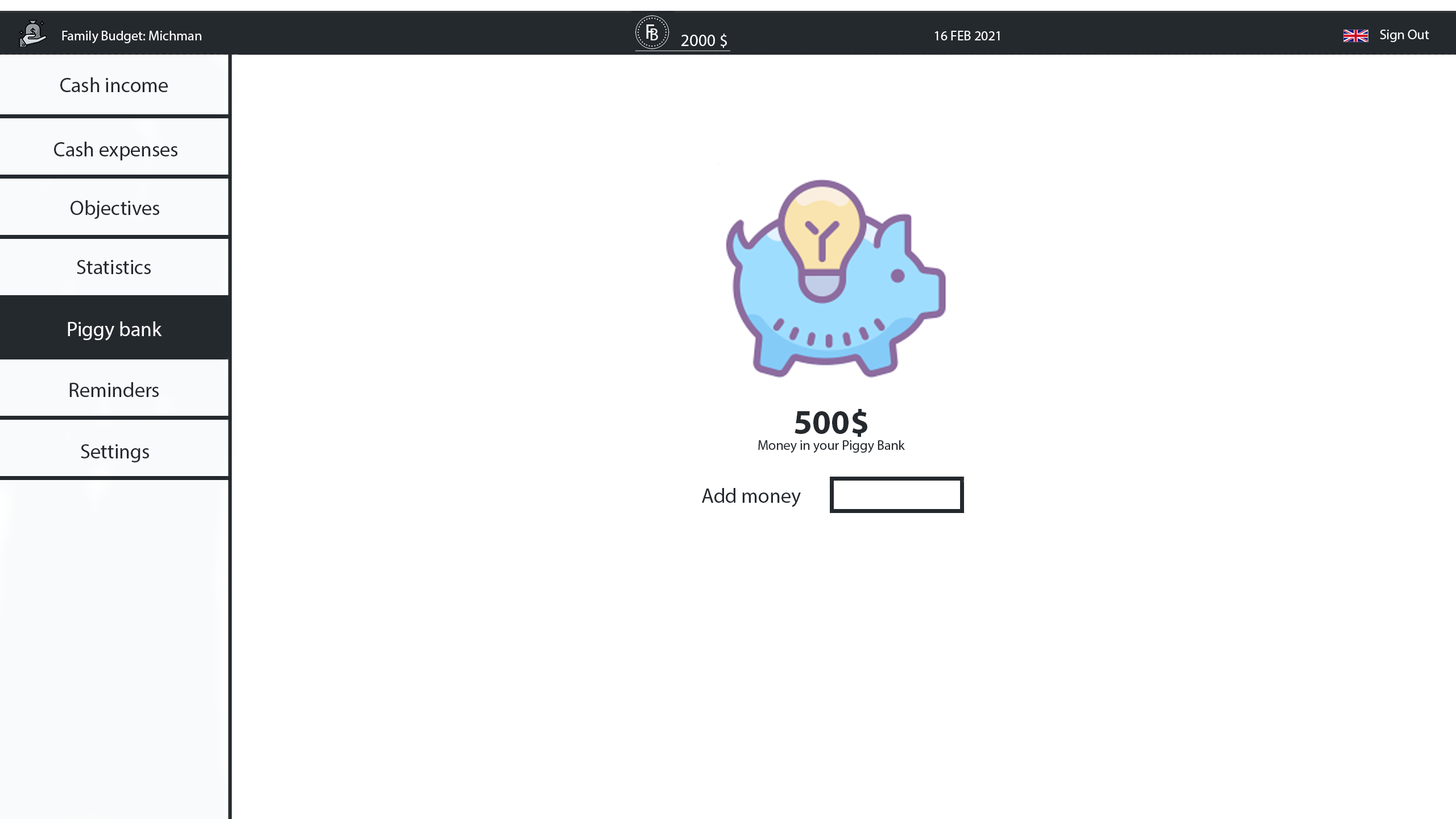
<style>
.page{position:relative;width:1456px;height:819px;background:#ffffff}
.page>*{position:absolute;margin:0}
.t1{font:13.6px "MyriadPro-Regular";color:#f8fafb}
.t2{font:13.6px "MyriadPro-Regular";color:#ffffff}
.t3{font:17.1px "MyriadPro-Regular";color:#ffffff}
.t4{font:20.5px "MyriadPro-Regular";color:#24292e}
.t5{font:20.5px "MyriadPro-Regular";color:#ffffff}
.t6{font:13.6px "MyriadPro-Regular";color:#24292e}
.t7{font:34.1px "MyriadPro-Bold";color:#24292e}
</style>
<div class="page">
<p class="t1" style="left:1380px;top:30px;width:49px;height:12px">Sign Out</p>
<p class="t2" style="left:62px;top:31px;width:139px;height:12px">Family Budget: Michman</p>
<p class="t3" style="left:681px;top:34px;width:46px;height:14px">2000 $</p>
<p class="t2" style="left:935px;top:31px;width:65px;height:9px">16 FEB 2021</p>
<p class="t4" style="left:60px;top:77px;width:108px;height:15px">Cash income</p>
<p class="t4" style="left:54px;top:142px;width:123px;height:18px">Cash expenses</p>
<p class="t4" style="left:71px;top:200px;width:88px;height:19px">Objectives</p>
<p class="t4" style="left:77px;top:260px;width:74px;height:14px">Statistics</p>
<p class="t5" style="left:68px;top:321px;width:94px;height:20px">Piggy bank</p>
<p class="t4" style="left:69px;top:382px;width:90px;height:15px">Reminders</p>
<p class="t6" style="left:758px;top:409px;width:147px;height:44px;text-align:center"><span class="t7">500$<br></span>Money in your Piggy Bank</p>
<p class="t4" style="left:81px;top:444px;width:68px;height:18px">Settings</p>
</div>
